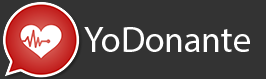
<style>
.page{position:relative;width:266px;height:79px;background:#333333}
.page>*{position:absolute;margin:0}
.t1{font:36.1px "MyriadPro-Regular";letter-spacing:-0.005em;color:#ffffff}
</style>
<div class="page">
<p class="t1" style="left:84px;top:27px;width:166px;height:25px">YoDonante</p>
</div>
